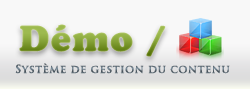
<style>
.page{position:relative;width:250px;height:89px;background:#f8f8f8}
.page>*{position:absolute;margin:0}
.t1{font:36px "CooperBlackStd";letter-spacing:0.04em}
.t2{font:11px "TrajanPro-Bold";letter-spacing:0.04em}
</style>
<div class="page">
<p class="t1" style="left:19px;top:24px;width:147px;height:33px">Démo /</p>
<p class="t2" style="left:15px;top:63px;width:215px;height:11px">Système de gestion du contenu</p>
</div>
